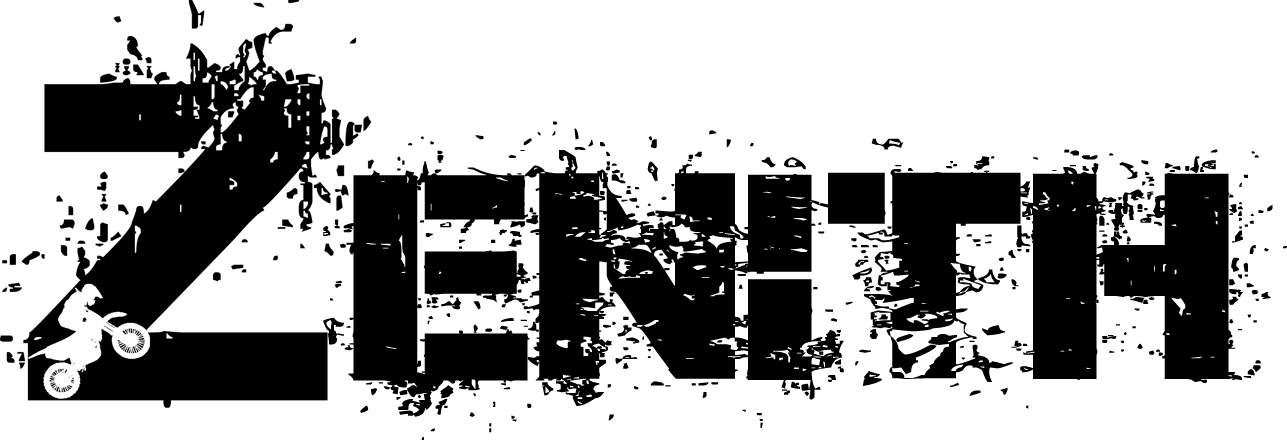
<style>
.page{position:relative;width:1287px;height:440px;background:#ffffff}
.page>*{position:absolute;margin:0}
.t1{font:500px "Bang4YaBuck";color:#000000}
</style>
<div class="page">
<p class="t1" style="left:323px;top:121px;width:964px;height:319px">enith</p>
</div>
